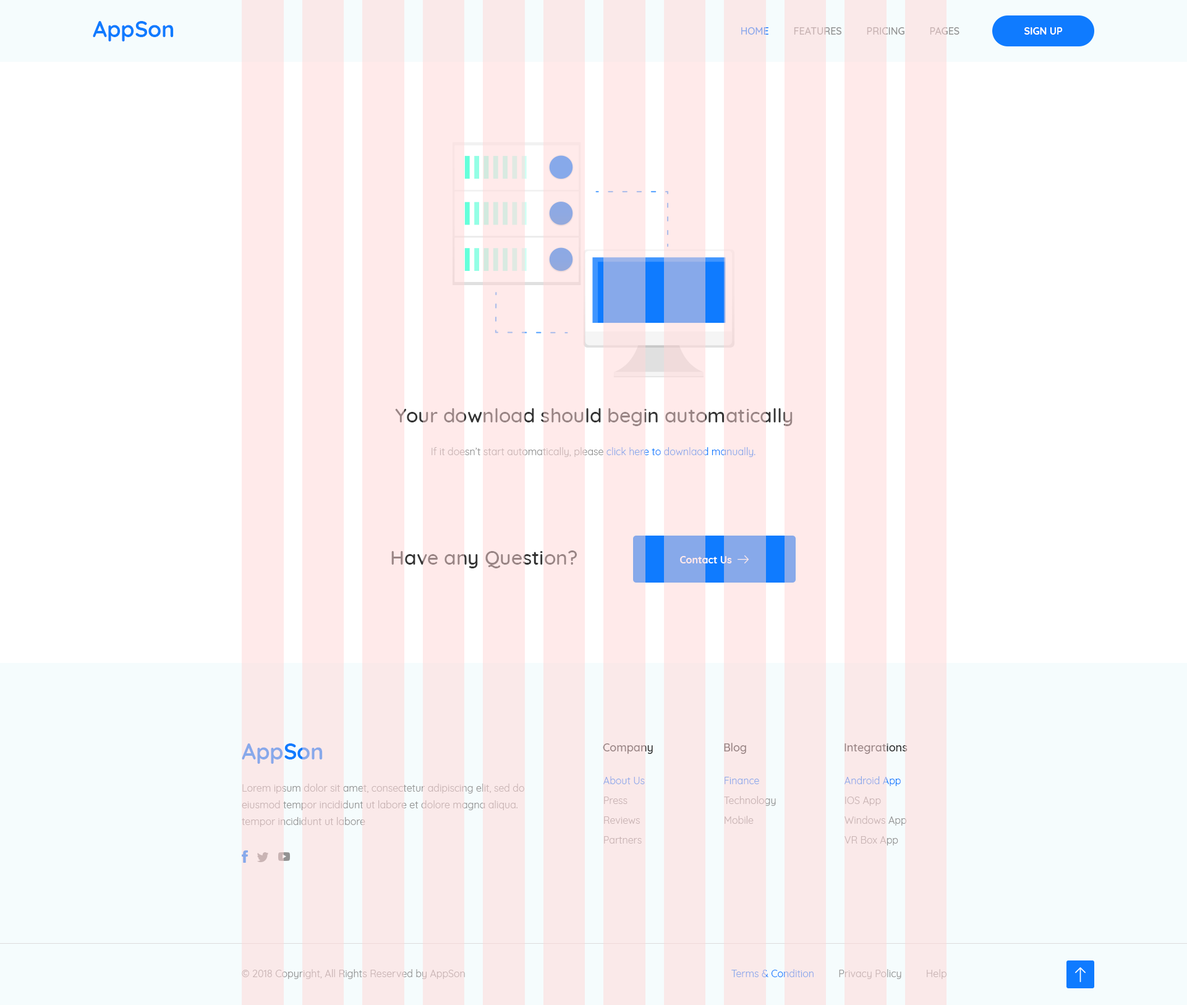
<style>
.page{position:relative;width:1187px;height:1005px;background:#ffffff}
.page>*{position:absolute;margin:0}
.t1{font:22.3px "Quicksand-Bold";color:#0f7bff}
.t2{font:9.9px "Quicksand-Medium";text-transform:uppercase}
.t3{font:9.9px "Quicksand-Bold";color:#ffffff}
.t4{font:19.8px "Quicksand-Medium"}
.t5{font:9.9px "Quicksand-Regular"}
.t6{font:22.3px "Quicksand-Bold";color:#87a9ea}
.t7{font:11.1px "Quicksand-Medium";color:#998585}
.t8{font:9.9px/16.7px "Quicksand-Regular"}
.t9{font:9.9px "Quicksand-Regular";color:#87a9ea}
.t10{font:9.9px "Quicksand-Regular";color:#c9b4b4}
</style>
<div class="page">
<p class="t1" style="left:93px;top:21px;width:81px;height:20px">AppSon</p>
<p class="t2" style="left:741px;top:27px;width:218px;height:8px">Home         Features         Pricing         Pages</p>
<p class="t3" style="left:1024px;top:27px;width:39px;height:8px">SIGN UP</p>
<p class="t4" style="left:395px;top:408px;width:398px;height:18px">Your download should begin automatically</p>
<p class="t5" style="left:432px;top:447px;width:323px;height:10px">If it doesn’t start automatically, please click here to downlaod manually.</p>
<p class="t4" style="left:391px;top:550px;width:186px;height:18px">Have any Question?</p>
<p class="t3" style="left:680px;top:556px;width:52px;height:7px">Contact Us</p>
<p class="t6" style="left:242px;top:743px;width:81px;height:20px">AppSon</p>
<p class="t7" style="left:603px;top:743px;width:50px;height:11px">Company</p>
<p class="t7" style="left:724px;top:742px;width:22px;height:12px">Blog</p>
<p class="t7" style="left:844px;top:743px;width:64px;height:11px">Integrations</p>
<p class="t8" style="left:242px;top:783px;width:282px;height:44px">Lorem ipsum dolor sit amet, consectetur adipiscing elit, sed do eiusmod tempor incididunt ut labore et dolore magna aliqua. tempor incididunt ut labore</p>
<p class="t9" style="left:603px;top:776px;width:42px;height:8px">About Us</p>
<p class="t9" style="left:725px;top:776px;width:34px;height:8px">Finance</p>
<p class="t5" style="left:844px;top:776px;width:57px;height:10px">Android App</p>
<p class="t10" style="left:604px;top:796px;width:23px;height:8px">Press</p>
<p class="t10" style="left:724px;top:796px;width:52px;height:10px">Technology</p>
<p class="t10" style="left:845px;top:796px;width:36px;height:10px">IOS App</p>
<p class="t10" style="left:604px;top:816px;width:36px;height:7px">Reviews</p>
<p class="t10" style="left:725px;top:815px;width:29px;height:8px">Mobile</p>
<p class="t5" style="left:844px;top:815px;width:62px;height:10px">Windows App</p>
<p class="t10" style="left:604px;top:836px;width:38px;height:7px">Partners</p>
<p class="t10" style="left:844px;top:836px;width:54px;height:9px">VR Box App</p>
<p class="t10" style="left:242px;top:969px;width:223px;height:10px">© 2018 Copyright, All Rights Reserved by AppSon</p>
<p class="t5" style="left:731px;top:969px;width:215px;height:10px">Terms &amp; Condition         Privacy Policy         Help</p>
</div>
